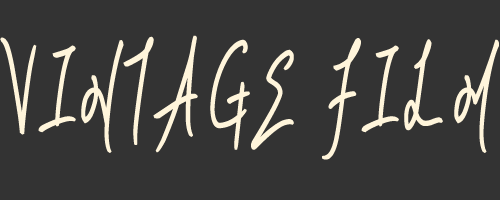
<style>
.page{position:relative;width:500px;height:200px;background:#333333}
.page>*{position:absolute;margin:0}
.t1{font:108px "yleeMHIM";letter-spacing:0.15em;color:#fff5db;text-transform:uppercase;font-weight:bold;scale:0.56 1}
</style>
<div class="page">
<p class="t1" style="left:0px;top:35px;width:499px;height:125px">VINTAGE FILM</p>
</div>
